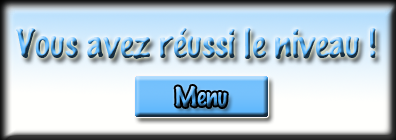
<style>
.page{position:relative;width:396px;height:140px}
.page>*{position:absolute;margin:0}
.t1{font:36px "MarkerFelt-Thin"}
.t2{font:24px "MarkerFelt-Thin"}
</style>
<div class="page">
<p class="t1" style="left:16px;top:28px;width:360px;height:31px">Vous avez réussi le niveau !</p>
<p class="t2" style="left:175px;top:86px;width:52px;height:21px">Menu</p>
</div>
